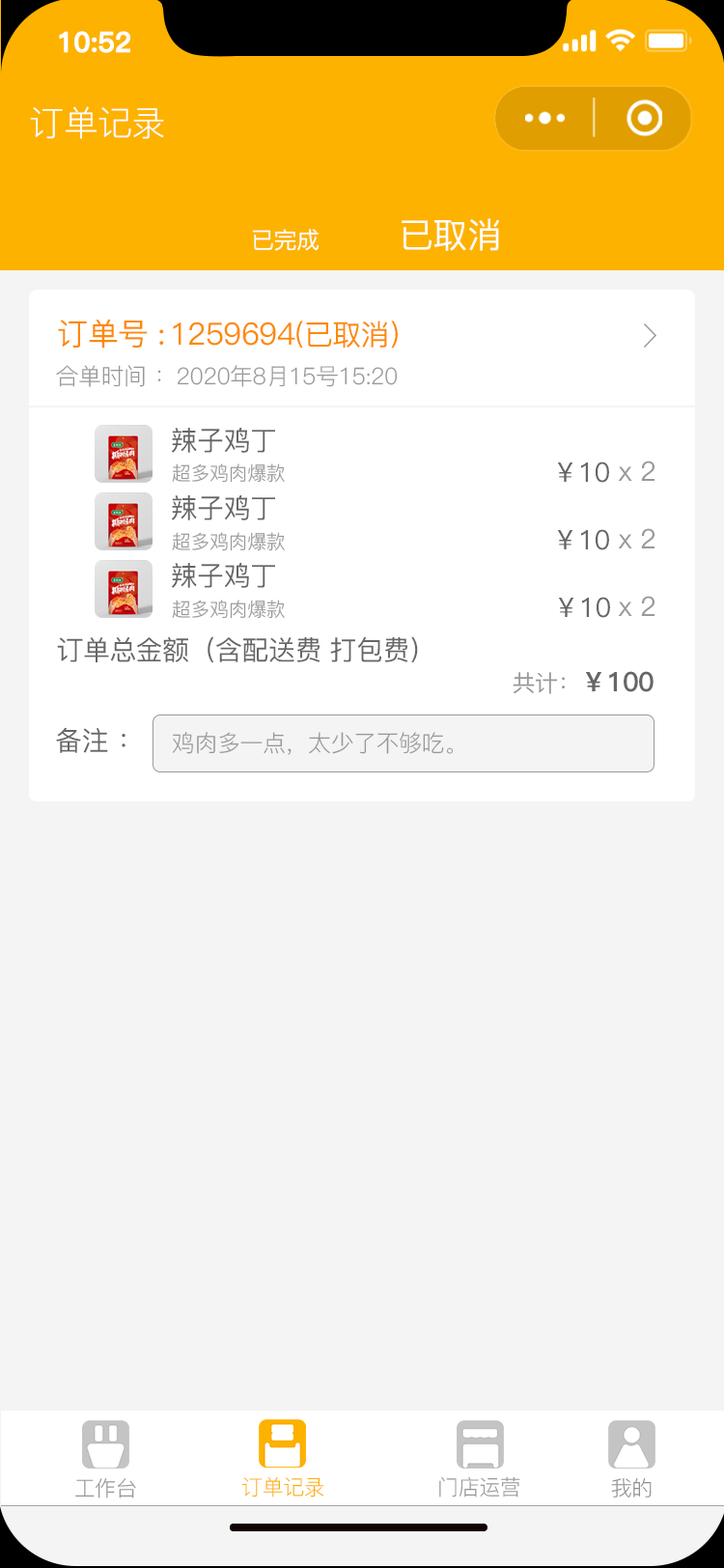
<style>
.page{position:relative;width:724px;height:1568px;background:#f4f4f4}
.page>*{position:absolute;margin:0}
.t1{font:27.5px "PingFang-SC-Bold";letter-spacing:-0.02em;color:#ffffff;font-weight:bold}
.t2{font:34.8px "PingFang-SC-Regular";letter-spacing:-0.02em;color:#ffffff}
.t3{font:34.8px "PingFang-SC-Medium";letter-spacing:-0.02em;color:#fefefe}
.t4{font:23.2px "PingFang-SC-Medium";letter-spacing:-0.02em;color:#fefefe}
.t5{font:30.9px "PingFang-SC-Medium";letter-spacing:-0.02em;color:#fd8900}
.t6{font:29px "PingFang-SC-Medium";letter-spacing:-0.02em;color:#fd8900}
.t7{font:23.2px "PingFang-SC-Regular";letter-spacing:-0.02em;color:#999999}
.t8{font:27px "PingFang-SC-Medium";letter-spacing:-0.02em;color:#666666}
.t9{font:27px "PingFang-SC-Medium";letter-spacing:-0.02em;color:#999999}
.t10{font:19.3px "PingFang-SC-Regular";letter-spacing:-0.02em;color:#999999}
.t11{font:27px "PingFang-SC-Heavy";letter-spacing:-0.02em;color:#666666}
.t12{font:23.2px "PingFang-SC-Medium";letter-spacing:-0.02em;color:#999999}
.t13{font:21.2px "PingFang-SC-Regular";letter-spacing:-0.02em;color:#999999}
.t14{font:21.2px "PingFang-SC-Regular";letter-spacing:-0.02em;color:#fdb200}
.t15{font:21.2px "PingFang-SC-Regular";letter-spacing:-0.02em;color:#919191}
</style>
<div class="page">
<p class="t1" style="left:59px;top:31px;width:71px;height:22px">10:52</p>
<p class="t2" style="left:30px;top:106px;width:134px;height:33px">订单记录</p>
<p class="t3" style="left:402px;top:218px;width:97px;height:33px">已取消</p>
<p class="t4" style="left:252px;top:229px;width:68px;height:22px">已完成</p>
<p class="t5" style="left:58px;top:319px;width:106px;height:30px">订单号 :</p>
<p class="t5" style="left:173px;top:321px;width:225px;height:28px">1259694<span class="t6">(已取消）</span></p>
<p class="t7" style="left:56px;top:365px;width:342px;height:22px">合单时间 ：2020年8月15号15:20</p>
<p class="t8" style="left:172px;top:428px;width:103px;height:25px">辣子鸡丁</p>
<p class="t8" style="left:557px;top:462px;width:52px;height:21px">￥10</p>
<p class="t9" style="left:618px;top:461px;width:37px;height:20px">x 2</p>
<p class="t10" style="left:172px;top:463px;width:113px;height:20px">超多鸡肉爆款</p>
<p class="t8" style="left:172px;top:495px;width:103px;height:25px">辣子鸡丁</p>
<p class="t10" style="left:172px;top:532px;width:113px;height:19px">超多鸡肉爆款</p>
<p class="t8" style="left:557px;top:529px;width:52px;height:21px">￥10</p>
<p class="t9" style="left:618px;top:528px;width:37px;height:20px">x 2</p>
<p class="t8" style="left:172px;top:563px;width:103px;height:25px">辣子鸡丁</p>
<p class="t10" style="left:172px;top:600px;width:113px;height:19px">超多鸡肉爆款</p>
<p class="t8" style="left:558px;top:597px;width:52px;height:21px">￥10</p>
<p class="t9" style="left:618px;top:596px;width:37px;height:20px">x 2</p>
<p class="t8" style="left:57px;top:636px;width:361px;height:26px">订单总金额（含配送费 打包费）</p>
<p class="t11" style="left:513px;top:671px;width:141px;height:23px"><span class="t12">共计：</span>￥100</p>
<p class="t8" style="left:56px;top:727px;width:70px;height:26px">备注 ：</p>
<p class="t7" style="left:172px;top:732px;width:282px;height:23px">鸡肉多一点，太少了不够吃。</p>
<p class="t13" style="left:75px;top:1478px;width:61px;height:20px">工作台</p>
<p class="t14" style="left:241px;top:1477px;width:83px;height:21px">订单记录</p>
<p class="t13" style="left:439px;top:1476px;width:81px;height:22px">门店运营</p>
<p class="t15" style="left:611px;top:1478px;width:41px;height:20px">我的</p>
</div>
